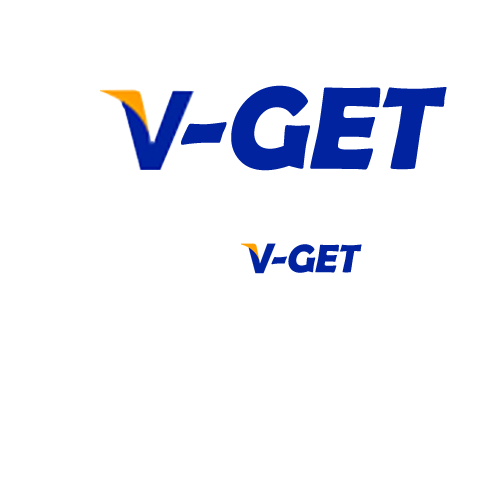
<style>
.page{position:relative;width:500px;height:500px;background:#ffffff}
.page>*{position:absolute;margin:0}
.t1{font:118px "BerlinSansFBDemi-Bold";letter-spacing:-0.005em;color:#01239f;font-style:italic}
.t2{font:40px "BerlinSansFBDemi-Bold";letter-spacing:-0.005em;color:#01239f;font-style:italic}
</style>
<div class="page">
<p class="t1" style="left:181px;top:85px;width:266px;height:86px">-GET</p>
<p class="t2" style="left:271px;top:244px;width:91px;height:29px">-GET</p>
</div>
